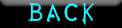
<style>
.page{position:relative;width:122px;height:28px;background:#000000}
.page>*{position:absolute;margin:0}
.t1{font:27.8px "RWBY_Style";letter-spacing:0.14em;color:#1ef2ff;scale:1.08 1}
</style>
<div class="page">
<p class="t1" style="left:28px;top:3px;width:66px;height:22px">back</p>
</div>
